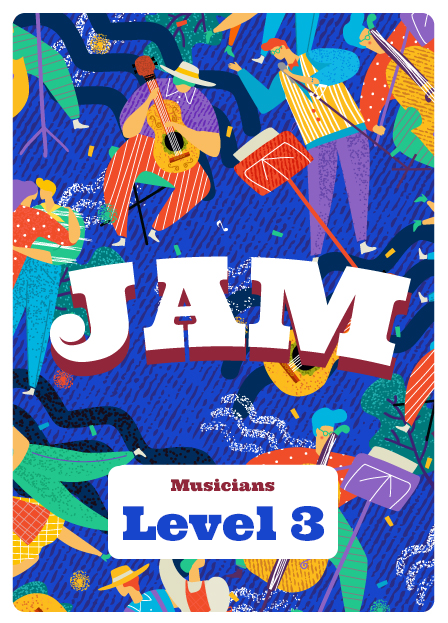
<style>
.page{position:relative;width:448px;height:623px}
.page>*{position:absolute;margin:0}
.t1{font:16.2px "Ultra-Regular";color:#91263a}
.t2{font:46.7px "Ultra-Regular";color:#1745cc}
</style>
<div class="page">
<p class="t1" style="left:171px;top:478px;width:104px;height:14px">Musicians</p>
<p class="t2" style="left:123px;top:506px;width:202px;height:35px">Level 3</p>
</div>
